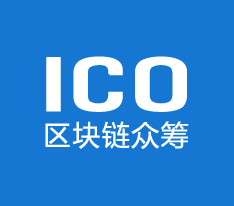
<style>
.page{position:relative;width:234px;height:206px;background:#1677d2}
.page>*{position:absolute;margin:0}
.t1{font:75.6px "UniversCondensedMedium";letter-spacing:-0.1em;color:#ffffff;font-weight:bold;scale:1.67 1}
.t2{font:28px "MicrosoftYaHei";letter-spacing:0.05em;color:#ffffff}
</style>
<div class="page">
<p class="t1" style="left:46px;top:56px;width:141px;height:56px">ICO</p>
<p class="t2" style="left:45px;top:121px;width:144px;height:28px">区块链众筹</p>
</div>
